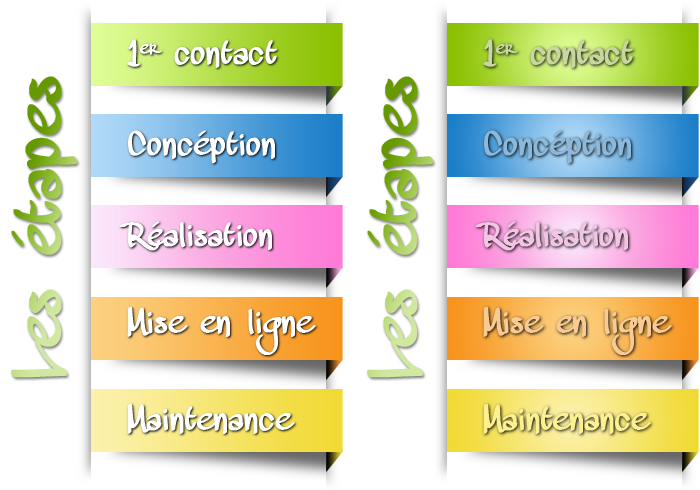
<style>
.page{position:relative;width:700px;height:490px;background:#ffffff}
.page>*{position:absolute;margin:0}
.t1{font:30px "MAWNSHandwriting";color:#ffffff;font-weight:bold}
.t2{font:30px "MAWNSHandwriting";color:#c7d79f;font-weight:bold}
.t3{font:60px "MAWNSHandwriting";font-weight:bold}
.t4{font:30px "MAWNSHandwriting";color:#f3c5e5;font-weight:bold}
.t5{font:30px "MAWNSHandwriting";color:#f8cb95;font-weight:bold}
.t6{font:30px "MAWNSHandwriting";color:#fdf091;font-weight:bold}
</style>
<div class="page">
<p class="t1" style="left:127px;top:39px;width:151px;height:29px">1er contact</p>
<p class="t2" style="left:483px;top:39px;width:151px;height:29px">1er contact</p>
<p class="t3" style="left:11px;top:76px;width:67px;height:302px;rotate:-90deg">Les étapes</p>
<p class="t3" style="left:367px;top:76px;width:67px;height:302px;rotate:-90deg">Les étapes</p>
<p class="t1" style="left:128px;top:130px;width:147px;height:34px">Concéption</p>
<p class="t1" style="left:119px;top:221px;width:153px;height:30px">Réalisation</p>
<p class="t4" style="left:475px;top:221px;width:153px;height:30px">Réalisation</p>
<p class="t1" style="left:127px;top:306px;width:189px;height:49px">Mise en ligne</p>
<p class="t5" style="left:483px;top:306px;width:189px;height:49px">Mise en ligne</p>
<p class="t1" style="left:127px;top:403px;width:168px;height:31px">Maintenance</p>
<p class="t6" style="left:483px;top:403px;width:168px;height:31px">Maintenance</p>
</div>
